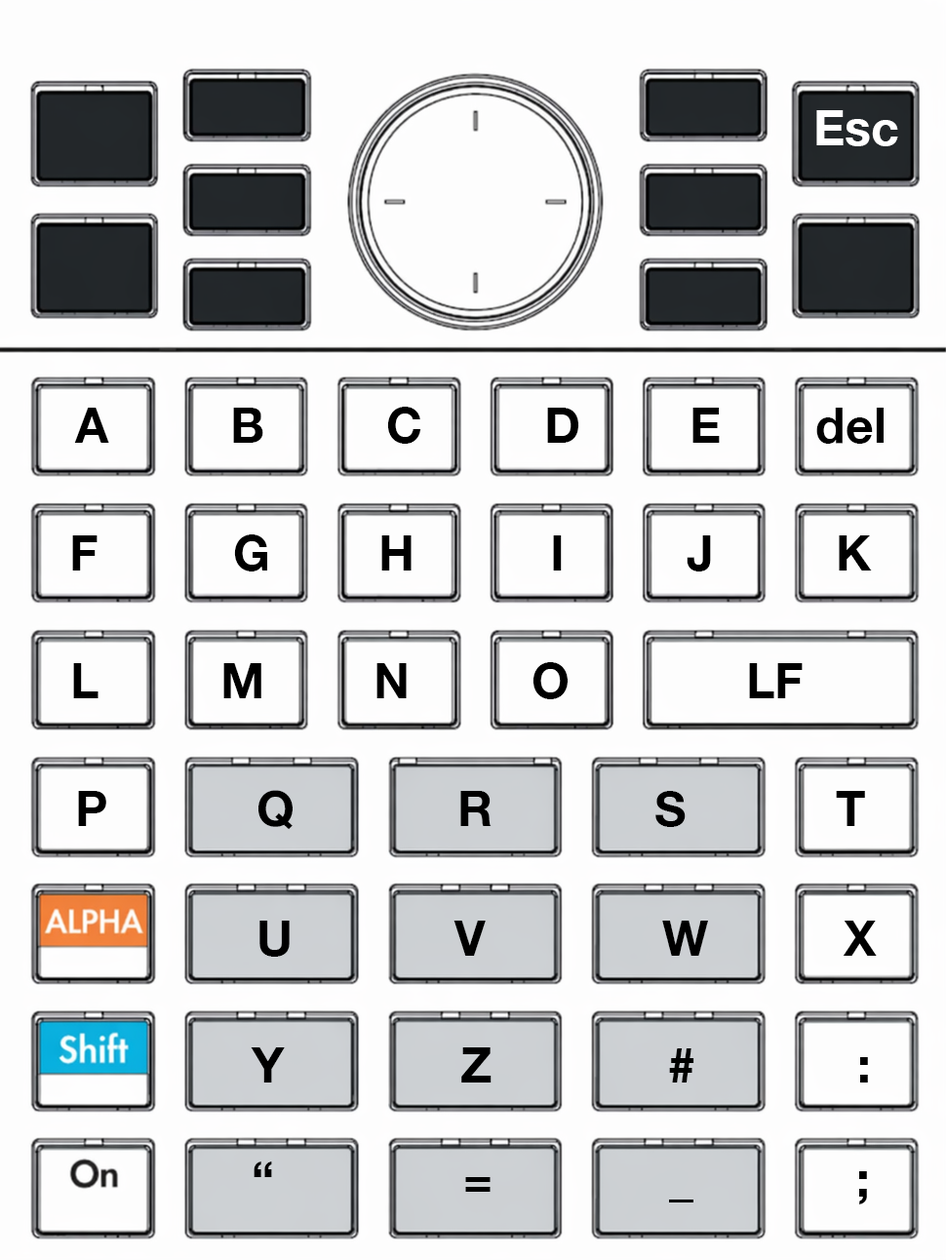
<style>
.page{position:relative;width:946px;height:1260px;background:#fdfdfd}
.page>*{position:absolute;margin:0}
.t1{font:48.8px "HelveticaNeue-Bold";color:#ffffff}
.t2{font:48.8px "HelveticaNeue-Bold";color:#000000}
</style>
<div class="page">
<p class="t1" style="left:816px;top:110px;width:82px;height:36px">Esc</p>
<p class="t2" style="left:74px;top:407px;width:810px;height:37px">A         B         C         D        E       del</p>
<p class="t2" style="left:72px;top:535px;width:800px;height:37px">F          G        H          I         J         K</p>
<p class="t2" style="left:73px;top:662px;width:730px;height:37px">L         M        N         O             LF</p>
<p class="t2" style="left:78px;top:790px;width:787px;height:40px">P           Q            R            S           T</p>
<p class="t2" style="left:259px;top:921px;width:618px;height:36px">U            V             W          X</p>
<p class="t2" style="left:251px;top:1048px;width:617px;height:35px">Y             Z             #            :</p>
<p class="t2" style="left:254px;top:1162px;width:613px;height:43px">“              =             _            ;</p>
</div>
